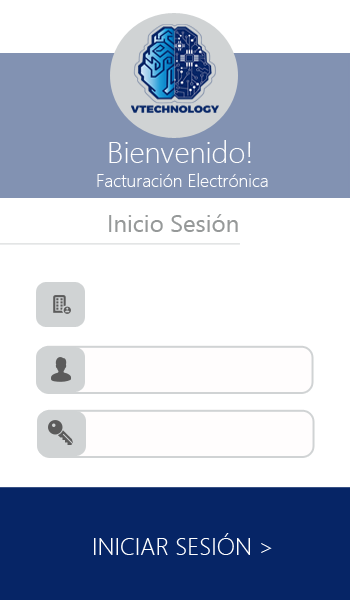
<style>
.page{position:relative;width:350px;height:600px;background:#ffffff}
.page>*{position:absolute;margin:0}
.t1{font:30px "SegoeUI-Light";color:#fefefe}
.t2{font:18px "SegoeUI-Light";color:#fefefe}
.t3{font:24px "SegoeUI";color:#969999}
.t4{font:24px "SegoeUI-Light";color:#fefefe}
</style>
<div class="page">
<p class="t1" style="left:109px;top:140px;width:142px;height:23px">Bienvenido!</p>
<p class="t2" style="left:97px;top:173px;width:171px;height:14px">Facturación Electrónica</p>
<p class="t3" style="left:109px;top:214px;width:129px;height:18px">Inicio Sesión</p>
<p class="t4" style="left:94px;top:533px;width:178px;height:22px">INICIAR SESIÓN &gt;</p>
</div>
